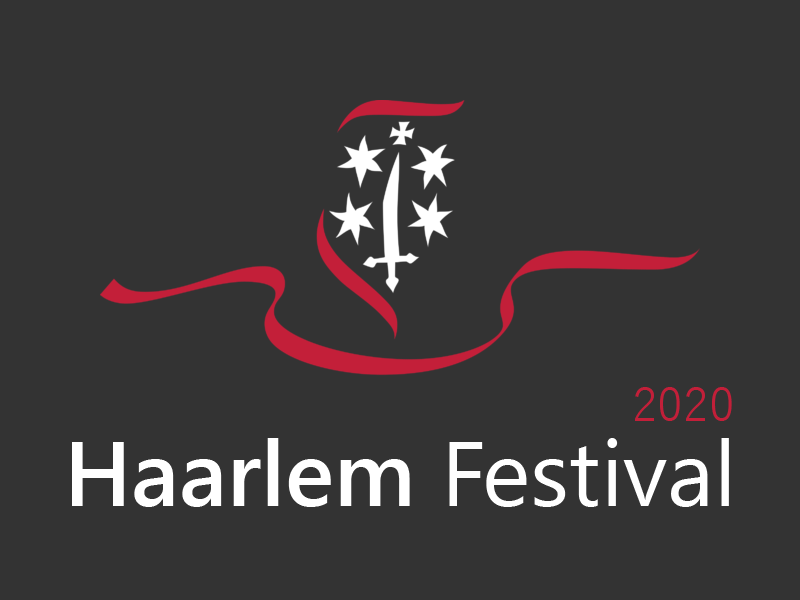
<style>
.page{position:relative;width:800px;height:600px;background:#333333}
.page>*{position:absolute;margin:0}
.t1{font:46px "YuGothic-Regular";color:#c31f39}
.t2{font:92px "YuGothicUI-Regular";color:#ffffff}
.t3{font:92px "YuGothicUI-Bold";color:#ffffff}
</style>
<div class="page">
<p class="t1" style="left:635px;top:387px;width:97px;height:34px">2020</p>
<p class="t2" style="left:72px;top:438px;width:657px;height:69px"><span class="t3">Haarlem </span>Festival</p>
</div>
